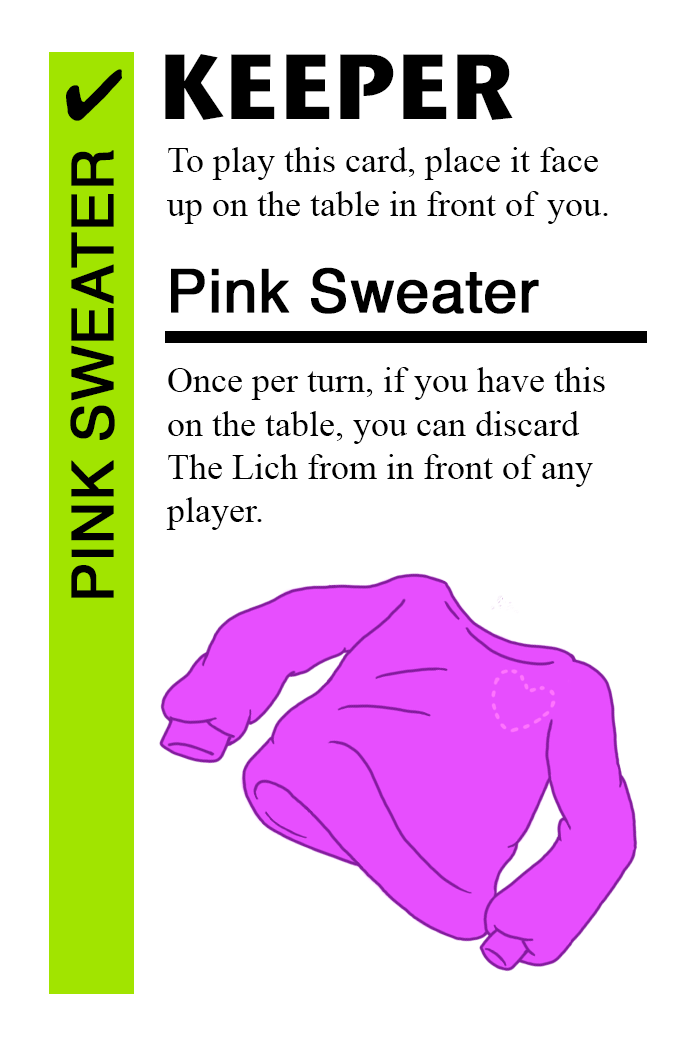
<style>
.page{position:relative;width:700px;height:1042px;background:#ffffff}
.page>*{position:absolute;margin:0}
.t1{font:92px "StoneSansITC-Bold";color:#000000}
.t2{font:72px "MS-Gothic";color:#000000}
.t3{font:58px "Helvetica";color:#000000;font-weight:bold}
.t4{font:36px "TimesNewRomanPSMT";color:#000000}
.t5{font:60px "Helvetica";color:#000000;font-weight:bold}
</style>
<div class="page">
<p class="t1" style="left:165px;top:54px;width:348px;height:66px">KEEPER</p>
<p class="t2" style="left:66px;top:69px;width:56px;height:52px">✔</p>
<p class="t3" style="left:70px;top:150px;width:45px;height:448px;rotate:-90deg">PINK SWEATER</p>
<p class="t4" style="left:167px;top:147px;width:441px;height:77px">To play this card, place it face<br>up on the table in front of you.</p>
<p class="t5" style="left:171px;top:267px;width:368px;height:47px">Pink Sweater</p>
<p class="t4" style="left:166px;top:367px;width:439px;height:163px">Once per turn, if you have this <br>on the table, you can discard <br>The Lich from in front of any <br>player.</p>
</div>
